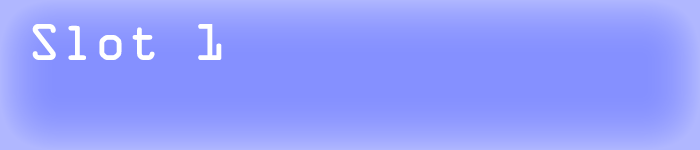
<style>
.page{position:relative;width:700px;height:150px;background:#8590ff}
.page>*{position:absolute;margin:0}
.t1{font:46px "OCRAStd";color:#ffffff}
</style>
<div class="page">
<p class="t1" style="left:32px;top:24px;width:190px;height:36px">Slot 1</p>
</div>
